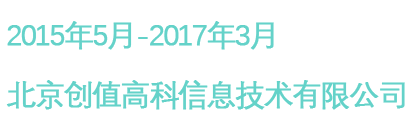
<style>
.page{position:relative;width:409px;height:128px;background:#ffffff}
.page>*{position:absolute;margin:0}
.t1{font:30px/60px "DengXian-Regular";letter-spacing:-0.075em;color:#64d2c9;text-transform:uppercase;font-weight:bold}
.t2{font:30px/60px "DengXian-Regular";letter-spacing:-0.075em;color:#64d2c9;font-weight:bold}
</style>
<div class="page">
<p class="t1" style="left:6px;top:21px;width:399px;height:89px">2015年5月-2017年3月<br><span class="t2">北京创值高科信息技术有限公司</span></p>
</div>
